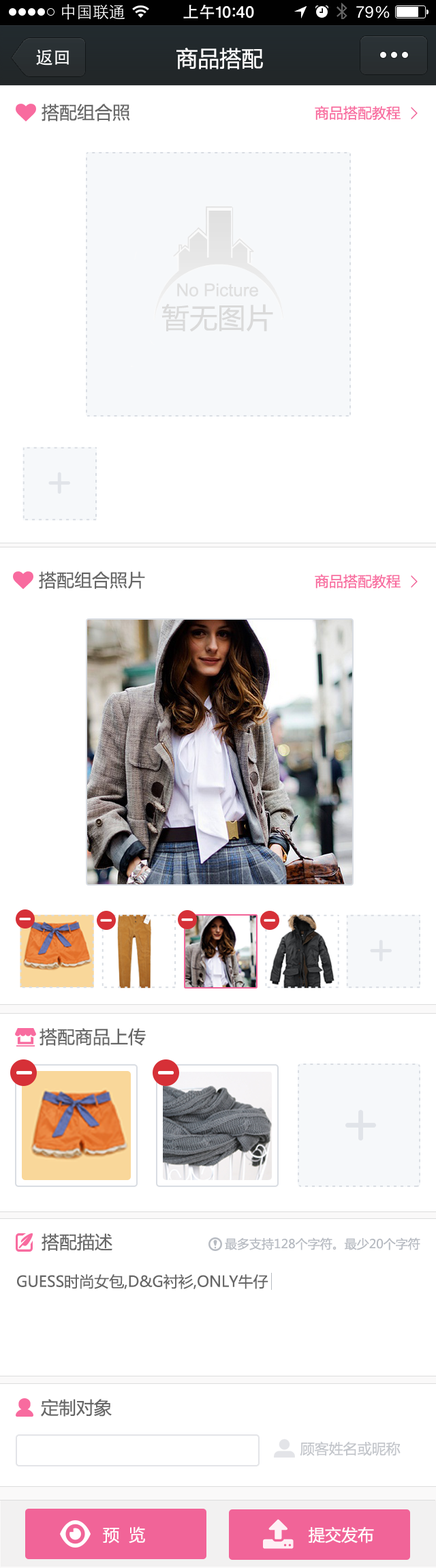
<style>
.page{position:relative;width:436px;height:1568px;background:#ffffff}
.page>*{position:absolute;margin:0}
.t1{font:21.8px "MicrosoftYaHei";color:#ffffff}
.t2{font:17.7px "MicrosoftYaHei";color:#676767}
.t3{font:14.3px "MicrosoftYaHei";color:#f86b9f}
.t4{font:17.7px "ArialMT";color:#dfdfdf}
.t5{font:28px "MicrosoftYaHei";color:#dadada}
.t6{font:12.3px "MicrosoftYaHei";color:#b7bbc2}
.t7{font:15px "MicrosoftYaHei";color:#676767}
.t8{font:14.3px "MicrosoftYaHei";color:#c3c6cb}
.t9{font:16.4px "MicrosoftYaHei";color:#ffffff}
</style>
<div class="page">
<p class="t1" style="left:177px;top:48px;width:86px;height:22px">商品搭配</p>
<p class="t2" style="left:42px;top:104px;width:88px;height:17px">搭配组合照</p>
<p class="t3" style="left:315px;top:106px;width:86px;height:14px">商品搭配教程</p>
<p class="t4" style="left:177px;top:283px;width:81px;height:14px">No Picture</p>
<p class="t5" style="left:162px;top:303px;width:111px;height:29px">暂无图片</p>
<p class="t2" style="left:39px;top:571px;width:106px;height:18px">搭配组合照片</p>
<p class="t3" style="left:315px;top:574px;width:86px;height:14px">商品搭配教程</p>
<p class="t2" style="left:40px;top:1028px;width:106px;height:18px">搭配商品上传</p>
<p class="t2" style="left:42px;top:1233px;width:70px;height:18px">搭配描述</p>
<p class="t6" style="left:225px;top:1237px;width:196px;height:13px">最多支持128个字符。最少20个字符</p>
<p class="t7" style="left:17px;top:1274px;width:252px;height:15px">GUESS时尚女包,D&amp;G衬衫,ONLY牛仔裤经典搭配组合，为您热情推荐。</p>
<p class="t2" style="left:41px;top:1399px;width:71px;height:18px">定制对象</p>
<p class="t8" style="left:300px;top:1441px;width:101px;height:15px">顾客姓名或昵称</p>
<p class="t9" style="left:103px;top:1526px;width:42px;height:17px">预  览</p>
<p class="t9" style="left:309px;top:1526px;width:65px;height:17px">提交发布</p>
</div>
